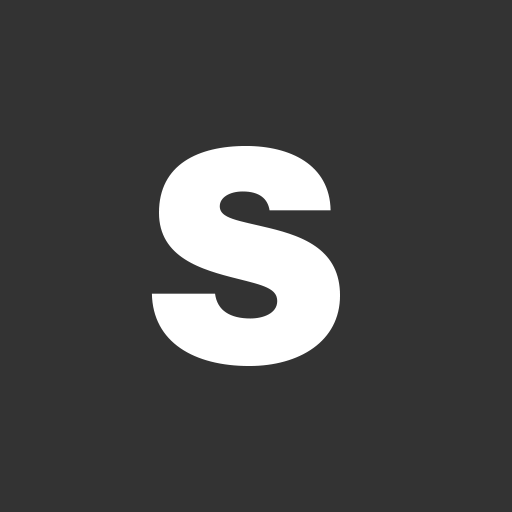
<style>
.page{position:relative;width:512px;height:512px;background:#333333}
.page>*{position:absolute;margin:0}
.t1{font:295px "NHaasGroteskDSPro-95Blk";color:#ffffff}
</style>
<div class="page">
<p class="t1" style="left:151px;top:146px;width:189px;height:220px">S</p>
</div>
